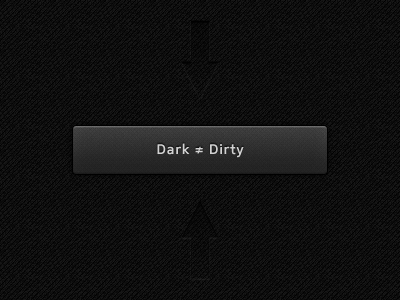
<style>
.page{position:relative;width:400px;height:300px}
.page>*{position:absolute;margin:0}
.t1{font:14px "Mentone-SemiBold";letter-spacing:0.05em;color:#d2d2d2}
</style>
<div class="page">
<p class="t1" style="left:157px;top:143px;width:87px;height:15px">Dark ≠ Dirty</p>
</div>
